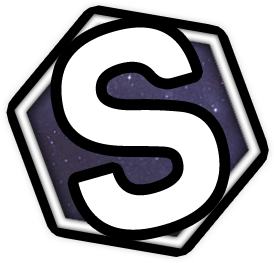
<style>
.page{position:relative;width:274px;height:263px;background:#ffffff}
.page>*{position:absolute;margin:0}
.t1{font:284.4px "HarabaraMaisBold-HarabaraMaisBold";color:#ffffff;text-transform:uppercase;scale:0.92 1}
</style>
<div class="page">
<p class="t1" style="left:61px;top:27px;width:159px;height:203px;rotate:-16deg">S</p>
</div>
